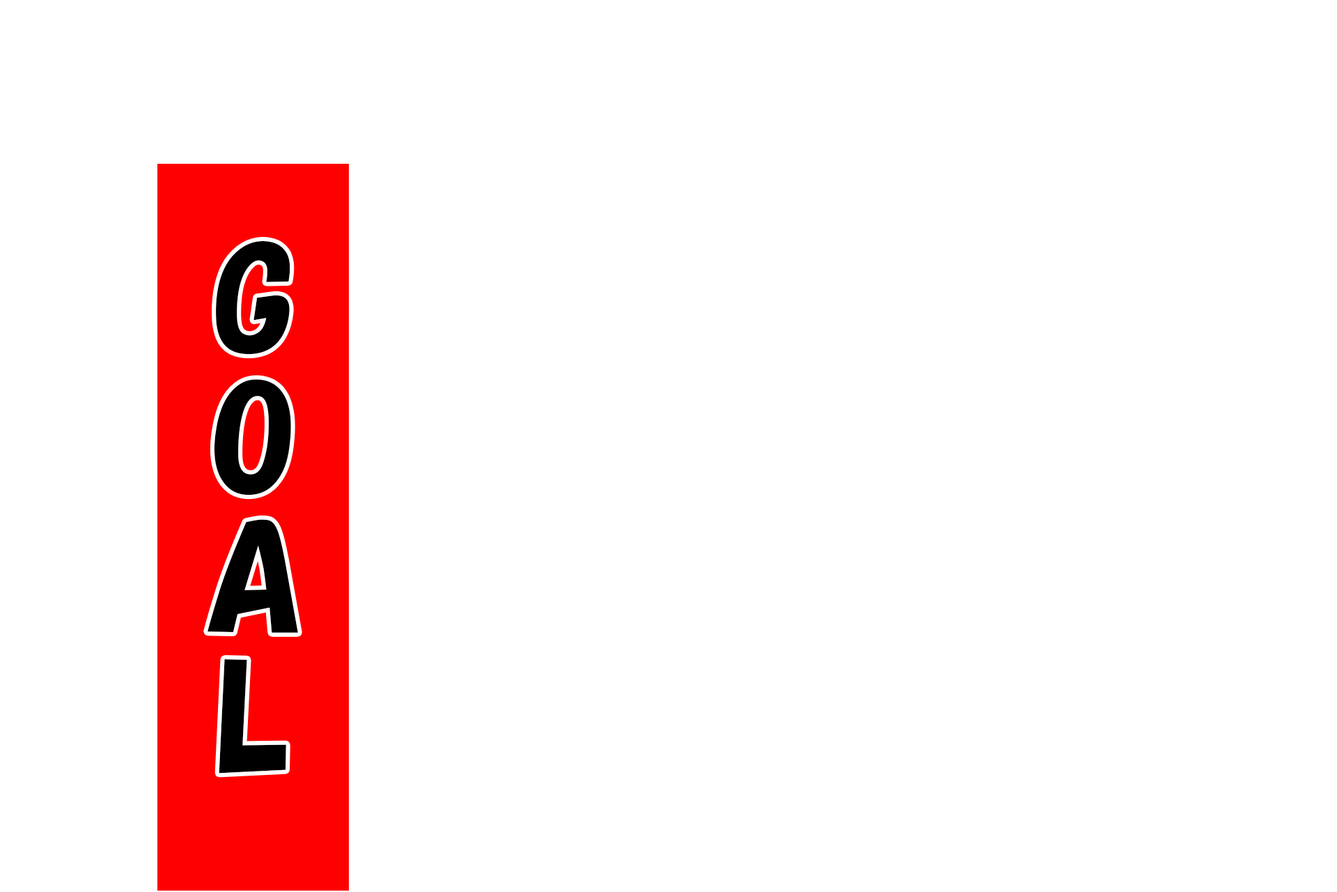
<style>
.page{position:relative;width:1337px;height:892px;background:#ffffff}
.page>*{position:absolute;margin:0}
.t1{font:139.3px/139.3px "HGPSoeiKakupoptai";letter-spacing:0.02em;color:#000000}
</style>
<div class="page">
<p class="t1" style="left:208px;top:241px;width:90px;height:532px;text-align:center">G<br>O<br>A<br>L</p>
</div>
